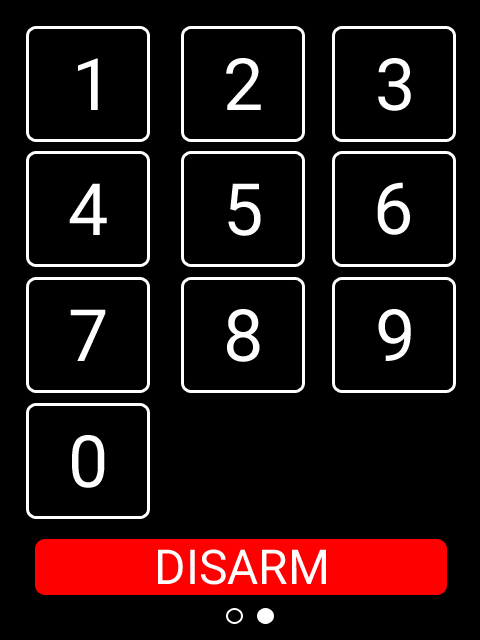
<style>
.page{position:relative;width:480px;height:640px;background:#000000}
.page>*{position:absolute;margin:0}
.t1{font:72px "Roboto-Regular";color:#ffffff}
.t2{font:48px "Roboto-Regular";color:#ffffff}
</style>
<div class="page">
<p class="t1" style="left:78px;top:58px;width:20px;height:52px">1</p>
<p class="t1" style="left:226px;top:58px;width:35px;height:52px">2</p>
<p class="t1" style="left:378px;top:58px;width:33px;height:53px">3</p>
<p class="t1" style="left:69px;top:183px;width:38px;height:52px">4</p>
<p class="t1" style="left:228px;top:183px;width:33px;height:53px">5</p>
<p class="t1" style="left:377px;top:182px;width:33px;height:53px">6</p>
<p class="t1" style="left:70px;top:309px;width:36px;height:52px">7</p>
<p class="t1" style="left:227px;top:309px;width:33px;height:53px">8</p>
<p class="t1" style="left:378px;top:309px;width:33px;height:52px">9</p>
<p class="t1" style="left:72px;top:435px;width:33px;height:53px">0</p>
<p class="t2" style="left:158px;top:549px;width:168px;height:36px">DISARM</p>
</div>
